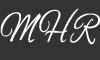
<style>
.page{position:relative;width:100px;height:60px;background:#333333}
.page>*{position:absolute;margin:0}
.t1{font:41.7px "AlexBrush-Regular";letter-spacing:0.1em;color:#ffffff;scale:0.75 1}
</style>
<div class="page">
<p class="t1" style="left:0px;top:8px;width:101px;height:37px">MHR</p>
</div>
